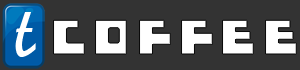
<style>
.page{position:relative;width:300px;height:70px;background:#333333}
.page>*{position:absolute;margin:0}
.t1{font:74.1px "JCfg";color:#ffffff}
.t2{font:60.4px "Trottoir";letter-spacing:0.08em;color:#ffffff;scale:0.91 1}
</style>
<div class="page">
<p class="t1" style="left:15px;top:12px;width:21px;height:45px">t</p>
<p class="t2" style="left:53px;top:20px;width:244px;height:34px">coffee</p>
</div>
